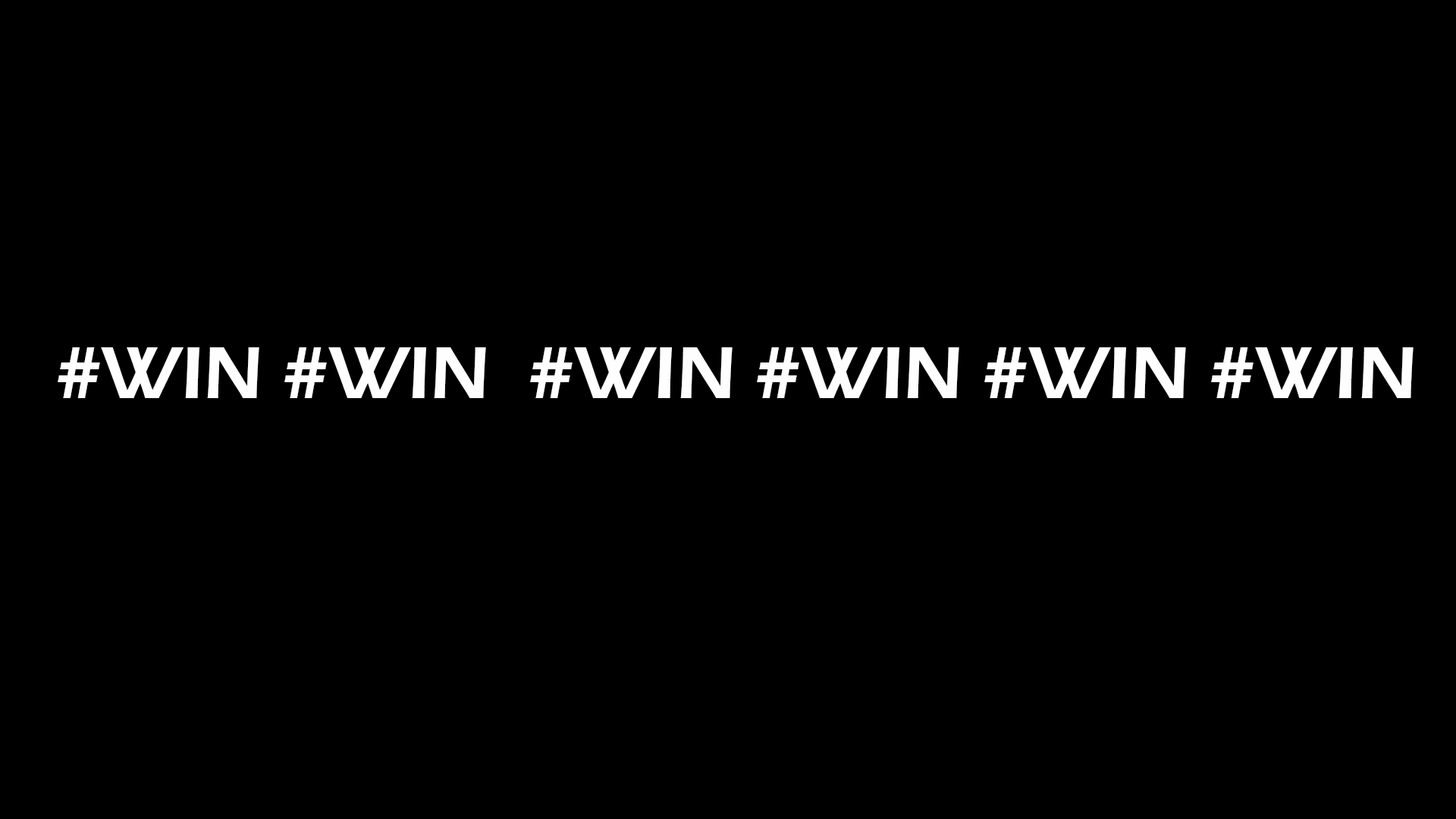
<style>
.page{position:relative;width:1456px;height:819px;background:#000000}
.page>*{position:absolute;margin:0}
.t1{font:75.8px "ErasITC-Demi";color:#fefefe}
</style>
<div class="page">
<p class="t1" style="left:58px;top:347px;width:1356px;height:51px">#WIN #WIN  #WIN #WIN #WIN #WIN</p>
</div>
